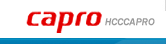
<style>
.page{position:relative;width:166px;height:44px;background:#ffffff}
.page>*{position:absolute;margin:0}
.t1{font:10.1px "FranklinGothic-MediumItalic";letter-spacing:-0.025em;color:#9a9a9a;font-weight:bold}
</style>
<div class="page">
<p class="t1" style="left:105px;top:18px;width:50px;height:8px">HCCCAPRO</p>
</div>
